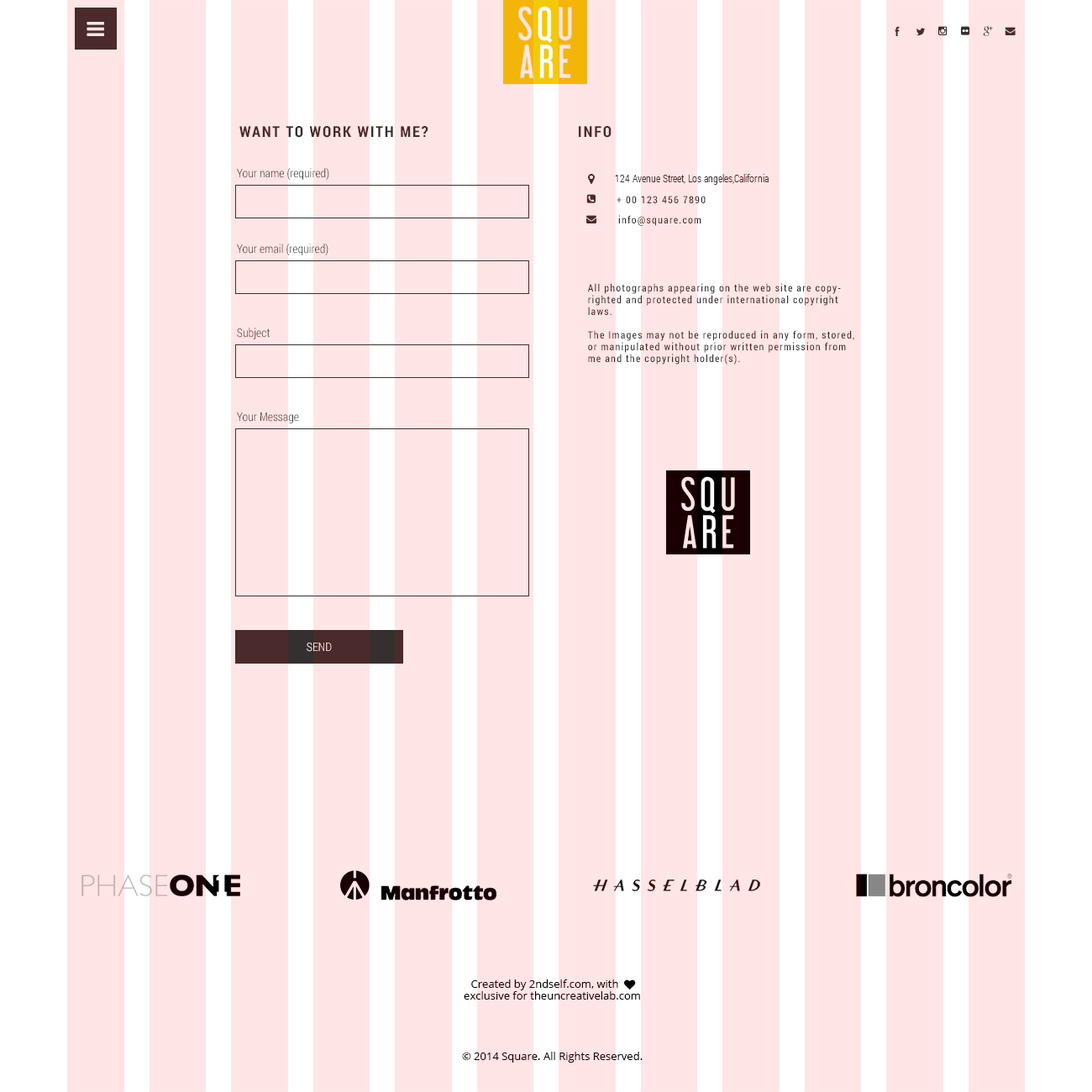
<style>
.page{position:relative;width:1092px;height:1092px;background:#ffe5e5}
.page>*{position:absolute;margin:0}
.t1{font:15.1px "RobotoCondensed-Bold";letter-spacing:0.1em;color:#362f2f;text-transform:uppercase}
.t2{font:11.8px "RobotoCondensed-Light";color:#362f2f}
.t3{font:10.1px "RobotoCondensed-Light";color:#362f2f}
.t4{font:10.1px "RobotoCondensed-Regular";letter-spacing:0.1em;color:#362f2f;text-transform:uppercase}
.t5{font:10.1px "RobotoCondensed-Regular";letter-spacing:0.1em;color:#362f2f}
.t6{font:11.8px "RobotoCondensed-Light";color:#4a2a2a}
.t7{font:10.1px/11.8px "RobotoCondensed-Regular";letter-spacing:0.1em;color:#362f2f}
.t8{font:11.8px "RobotoCondensed-Light"}
.t9{font:11.8px "RobotoCondensed-Light";color:#ffe5e5;text-transform:uppercase}
.t10{font:10.9px "OpenSans";color:#1a0000}
.t11{font:10.9px/20.2px "OpenSans"}
</style>
<div class="page">
<p class="t1" style="left:239px;top:126px;width:189px;height:12px">Want to work with me?</p>
<p class="t1" style="left:579px;top:126px;width:33px;height:12px">INFO</p>
<p class="t2" style="left:237px;top:168px;width:92px;height:13px">Your name (required)</p>
<p class="t3" style="left:615px;top:174px;width:154px;height:11px">124 Avenue Street, Los angeles,California</p>
<p class="t4" style="left:617px;top:196px;width:89px;height:7px">+ 00 123 456 7890</p>
<p class="t5" style="left:618px;top:215px;width:83px;height:11px">info@square.com</p>
<p class="t6" style="left:237px;top:244px;width:91px;height:12px">Your email (required)</p>
<p class="t7" style="left:588px;top:283px;width:266px;height:82px">All photographs appearing on the web site are copyrighted and protected under international copyright laws. <br><br>The Images may not be reproduced in any form, stored, or manipulated without prior written permission from me and the copyright holder(s).</p>
<p class="t8" style="left:237px;top:328px;width:33px;height:11px">Subject</p>
<p class="t2" style="left:237px;top:412px;width:62px;height:11px">Your Message</p>
<p class="t9" style="left:307px;top:643px;width:25px;height:9px">SEND</p>
<p class="t10" style="left:471px;top:979px;width:147px;height:11px">Created by 2ndself.com, with</p>
<p class="t11" style="left:462px;top:991px;width:181px;height:72px;text-align:center">exclusive for theuncreativelab.com<br><br><br>© 2014 Square. All Rights Reserved.</p>
</div>
